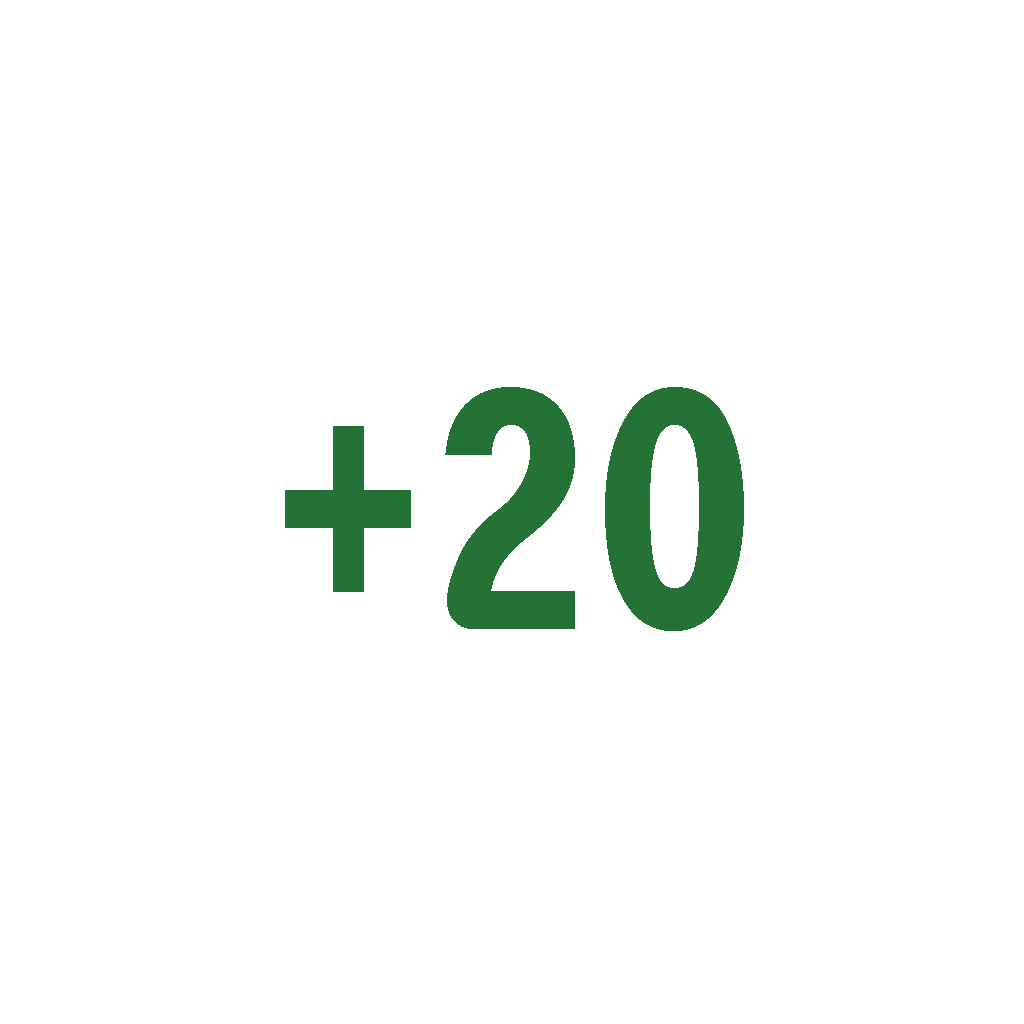
<style>
.page{position:relative;width:1024px;height:1024px;background:#ffffff}
.page>*{position:absolute;margin:0}
.t1{font:273px "HeadlineR-HM";letter-spacing:0.02em;color:#257237;scale:0.81 1}
</style>
<div class="page">
<p class="t1" style="left:285px;top:387px;width:459px;height:244px">+20</p>
</div>
